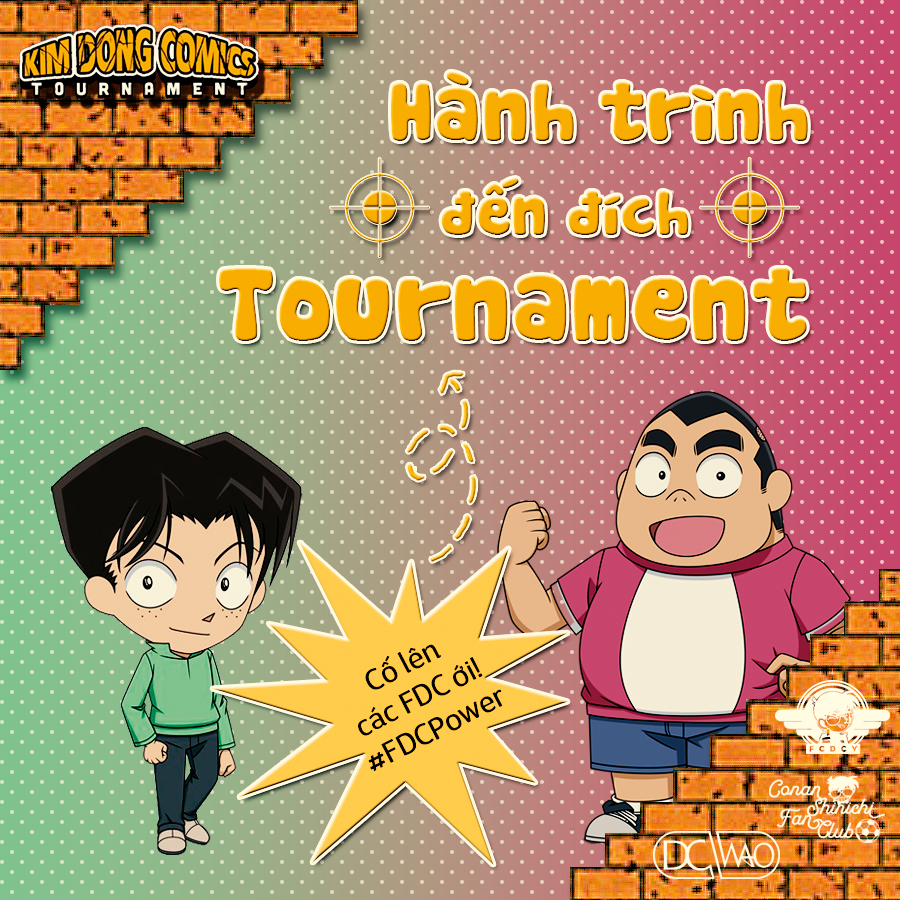
<style>
.page{position:relative;width:900px;height:900px}
.page>*{position:absolute;margin:0}
.t1{font:80px/100px "SVN-Cookies";color:#f8ad00}
.t2{font:100px/100px "SVN-Cookies";color:#f8ad00}
.t3{font:60px "SVN-Cookies";color:#f8ad00}
.t4{font:80px "SVN-Cookies";color:#f8ad00}
.t5{font:30px "SVN-DSari";color:#0d0c09}
</style>
<div class="page">
<p class="t1" style="left:219px;top:72px;width:589px;height:269px;text-align:right">Hành trình<br><br><span class="t2">Tournament</span></p>
<p class="t3" style="left:441px;top:178px;width:248px;height:57px"><span class="t4"><br></span>đến đích</p>
<p class="t5" style="left:358px;top:644px;width:145px;height:127px;text-align:center;rotate:-27deg">Cố lên<br>các FDC ới!<br>#FDCPower</p>
</div>
